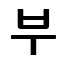
<style>
.page{position:relative;width:64px;height:64px;background:#ffffff}
.page>*{position:absolute;margin:0}
.t1{font:12px "NanumGothicBold";color:#000000}
</style>
<div class="page">
<p class="t1" style="left:11px;top:9px;width:45px;height:46px">부</p>
</div>
